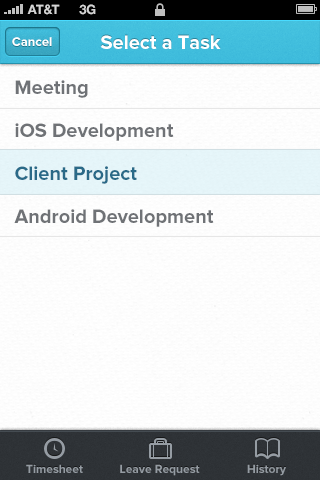
<style>
.page{position:relative;width:320px;height:480px;background:#fdfdfd}
.page>*{position:absolute;margin:0}
.t1{font:13px "HelveticaNeue-Bold";color:#d4d4d4;text-transform:uppercase}
.t2{font:13px "ProximaNova-Bold";color:#ffffff}
.t3{font:20px "ProximaNova-Bold";color:#ffffff}
.t4{font:20px/43px "ProximaNova-Bold";color:#6f7276}
.t5{font:20px/43px "ProximaNova-Bold";color:#2a6a88}
.t6{font:12px "ProximaNova-Bold";color:#959ca3}
</style>
<div class="page">
<p class="t1" style="left:27px;top:4px;width:33px;height:11px">AT&amp;t</p>
<p class="t1" style="left:79px;top:4px;width:17px;height:11px">3G</p>
<p class="t2" style="left:12px;top:37px;width:40px;height:9px">Cancel</p>
<p class="t3" style="left:100px;top:35px;width:121px;height:14px">Select a Task</p>
<p class="t4" style="left:14px;top:80px;width:200px;height:147px">Meeting<br>iOS Development<br><span class="t5">Client Project<br></span>Android Development</p>
<p class="t6" style="left:26px;top:464px;width:57px;height:9px">Timesheet</p>
<p class="t6" style="left:120px;top:464px;width:80px;height:12px">Leave Request</p>
<p class="t6" style="left:247px;top:464px;width:39px;height:12px">History</p>
</div>
